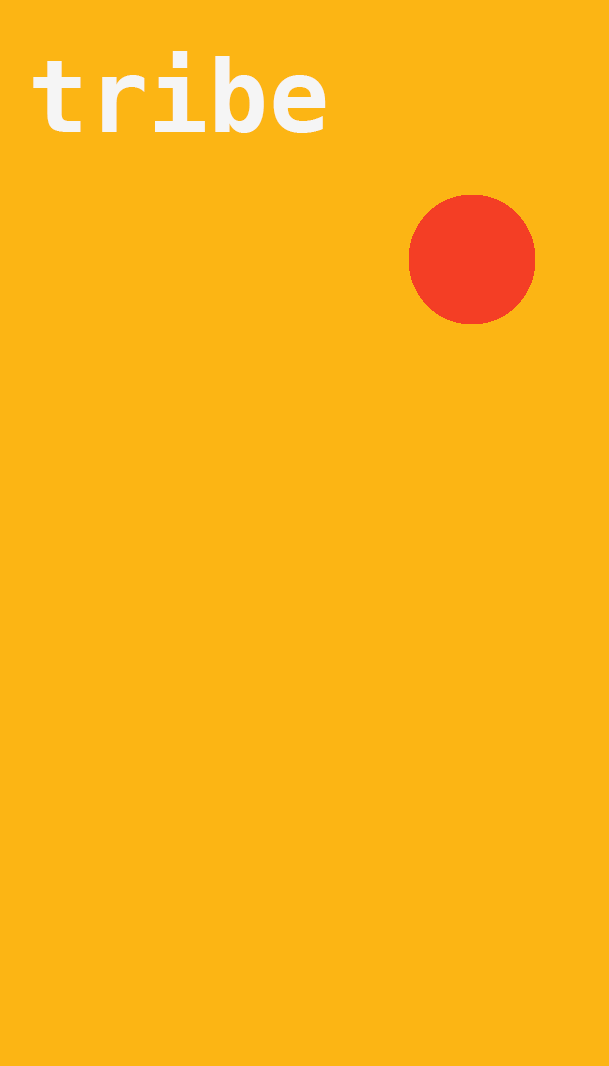
<style>
.page{position:relative;width:609px;height:1066px;background:#fcb514}
.page>*{position:absolute;margin:0}
.t1{font:100px "Menlo-Bold";color:#f5f5f5}
</style>
<div class="page">
<p class="t1" style="left:33px;top:51px;width:293px;height:82px">tribe</p>
</div>
